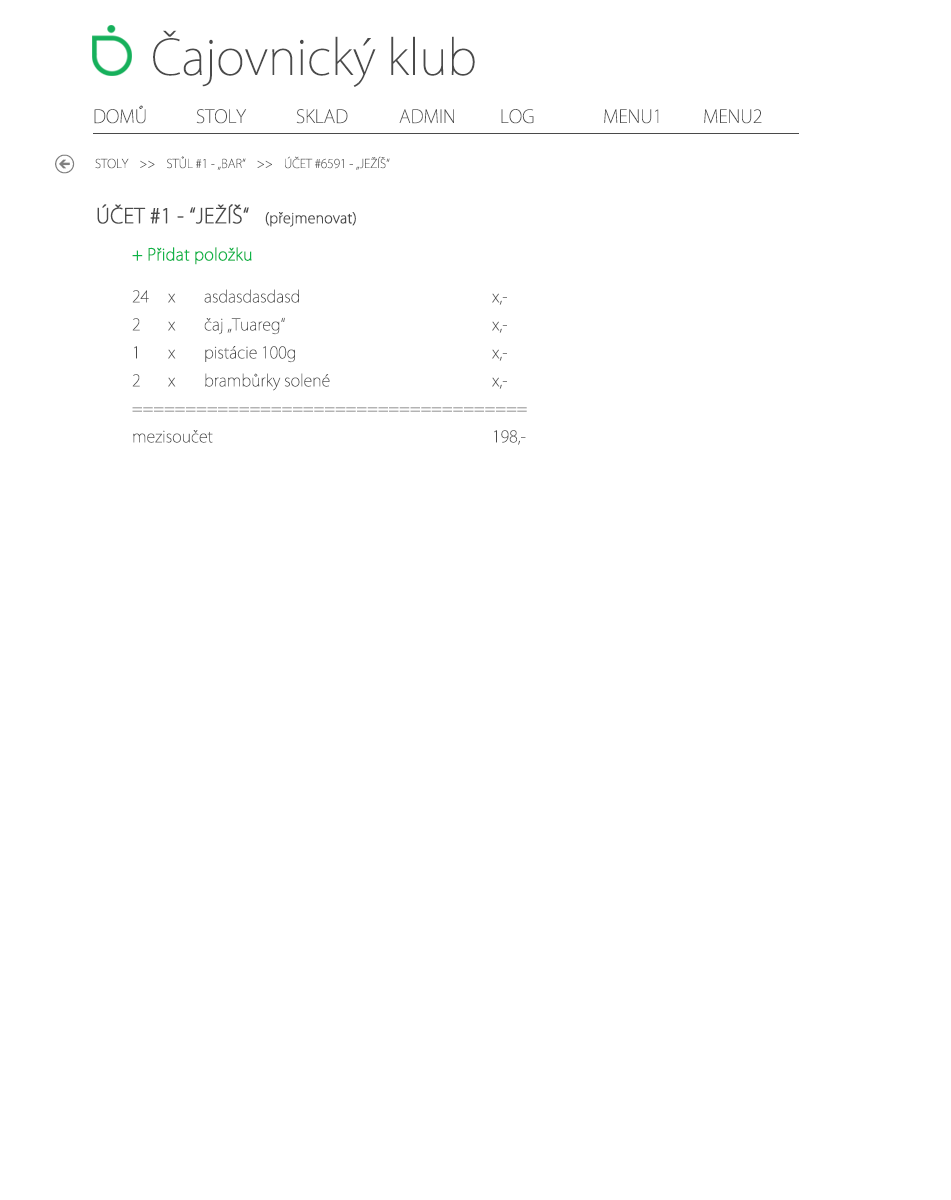
<style>
.page{position:relative;width:951px;height:1200px;background:#ffffff}
.page>*{position:absolute;margin:0}
.t1{font:48px "KozGoPr6N-ExtraLight";color:#4a4a4a}
.t2{font:18px "KozGoPr6N-ExtraLight";color:#4a4a4a;text-transform:uppercase}
.t3{font:12px "KozGoPr6N-ExtraLight";color:#5a5a5a;text-transform:uppercase}
.t4{font:16px/28px "KozGoPr6N-ExtraLight";color:#4a4a4a}
.t5{font:20px/28px "KozGoPr6N-ExtraLight";color:#4a4a4a;font-weight:bold}
.t6{font:14px/28px "KozGoPr6N-ExtraLight";color:#4a4a4a;font-weight:bold}
.t7{font:16px/14px "KozGoPr6N-ExtraLight";color:#0db448;font-weight:bold}
.t8{font:16px "KozGoPr6N-ExtraLight";color:#0db448;font-weight:bold}
.t9{font:16px/14px "KozGoPr6N-ExtraLight";color:#4a4a4a}
</style>
<div class="page">
<p class="t1" style="left:153px;top:30px;width:322px;height:57px">Čajovnický klub</p>
<p class="t2" style="left:94px;top:105px;width:52px;height:19px">DOMŮ</p>
<p class="t2" style="left:196px;top:109px;width:51px;height:15px">STOLY</p>
<p class="t2" style="left:296px;top:109px;width:52px;height:15px">SKLAD</p>
<p class="t2" style="left:399px;top:109px;width:55px;height:15px">ADMIN</p>
<p class="t2" style="left:501px;top:109px;width:33px;height:15px">LOG</p>
<p class="t2" style="left:604px;top:109px;width:55px;height:15px">MENU1</p>
<p class="t2" style="left:704px;top:109px;width:58px;height:15px">MENU2</p>
<p class="t3" style="left:95px;top:156px;width:295px;height:14px">STOLY    &gt;&gt;    STŮL #1 - „bar“    &gt;&gt;    ÚČET #6591 - „JEŽÍŠ“</p>
<p class="t4" style="left:97px;top:204px;width:430px;height:241px"><span class="t5">ÚČET #1 - “JEŽÍŠ“   </span><span class="t6">(přejmenovat)<br><br> </span><span class="t7">+</span><span class="t8"> Přidat položku<br></span><span class="t9"> <br> 24 x</span> asdasdasdasd      x,-<br> 2 x čaj „Tuareg“      x,-<br> 1 x pistácie 100g      x,-<br> 2 x brambůrky solené     x,-<br> =====================================<br> mezisoučet        198,-</p>
</div>
